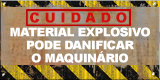
<style>
.page{position:relative;width:160px;height:80px}
.page>*{position:absolute;margin:0}
.t1{font:14px "Arial-Black";letter-spacing:0.35em;color:#d20f0c;text-transform:uppercase;scale:0.97 1}
.t2{font:12px/13px "Arial-Black";letter-spacing:-0.04em;color:#ffffff;text-transform:uppercase}
</style>
<div class="page">
<p class="t1" style="left:30px;top:12px;width:97px;height:11px">CUIDADO</p>
<p class="t2" style="left:10px;top:27px;width:140px;height:37px;text-align:center">material explosivo<br>pode danificar<br>o maquinário</p>
</div>
